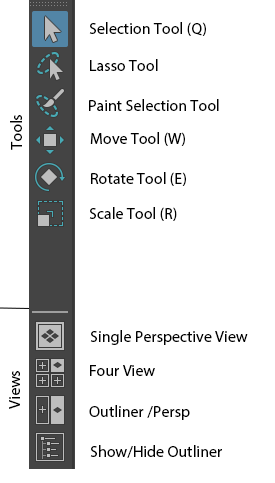
<style>
.page{position:relative;width:275px;height:483px;background:#ffffff}
.page>*{position:absolute;margin:0}
.t1{font:16px "MyriadPro-Regular";color:#000000}
</style>
<div class="page">
<p class="t1" style="left:89px;top:22px;width:117px;height:14px">Selection Tool (Q)</p>
<p class="t1" style="left:90px;top:59px;width:68px;height:12px">Lasso Tool</p>
<p class="t1" style="left:89px;top:99px;width:130px;height:12px">Paint Selection Tool</p>
<p class="t1" style="left:10px;top:115px;width:12px;height:35px;rotate:-90deg">Tools</p>
<p class="t1" style="left:90px;top:132px;width:95px;height:14px">Move Tool (W)</p>
<p class="t1" style="left:91px;top:172px;width:95px;height:14px">Rotate Tool (E)</p>
<p class="t1" style="left:89px;top:207px;width:88px;height:14px">Scale Tool (R)</p>
<p class="t1" style="left:90px;top:330px;width:158px;height:15px">Single Perspective View</p>
<p class="t1" style="left:90px;top:365px;width:65px;height:11px">Four View</p>
<p class="t1" style="left:9px;top:371px;width:11px;height:38px;rotate:-90deg">Views</p>
<p class="t1" style="left:89px;top:405px;width:101px;height:15px">Outliner /Persp</p>
<p class="t1" style="left:90px;top:445px;width:132px;height:13px">Show/Hide Outliner</p>
</div>
